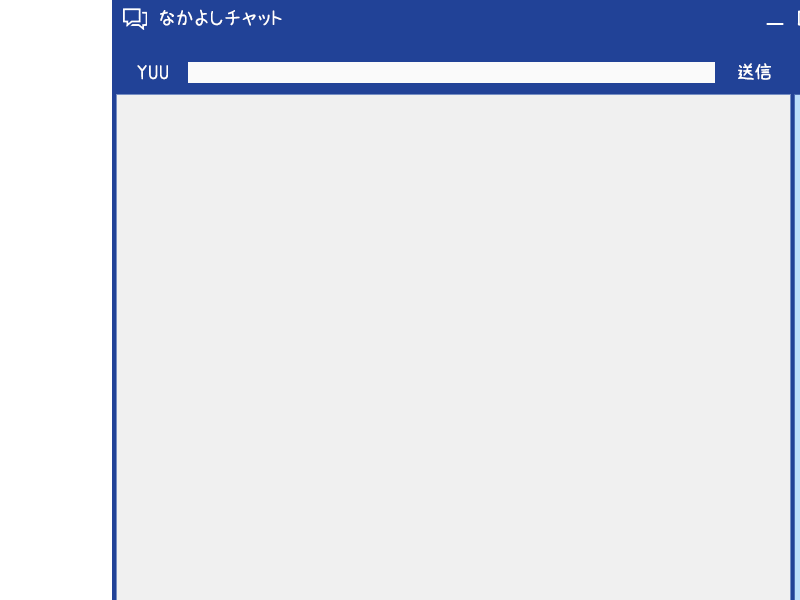
<style>
.page{position:relative;width:800px;height:600px;background:#f0f0f0}
.page>*{position:absolute;margin:0}
.t1{font:18px "HonyaJi-Re";color:#ffffff}
</style>
<div class="page">
<p class="t1" style="left:160px;top:9px;width:122px;height:17px">なかよしチャット</p>
<p class="t1" style="left:137px;top:65px;width:31px;height:15px">YUU</p>
<p class="t1" style="left:738px;top:63px;width:33px;height:17px">送信</p>
</div>
